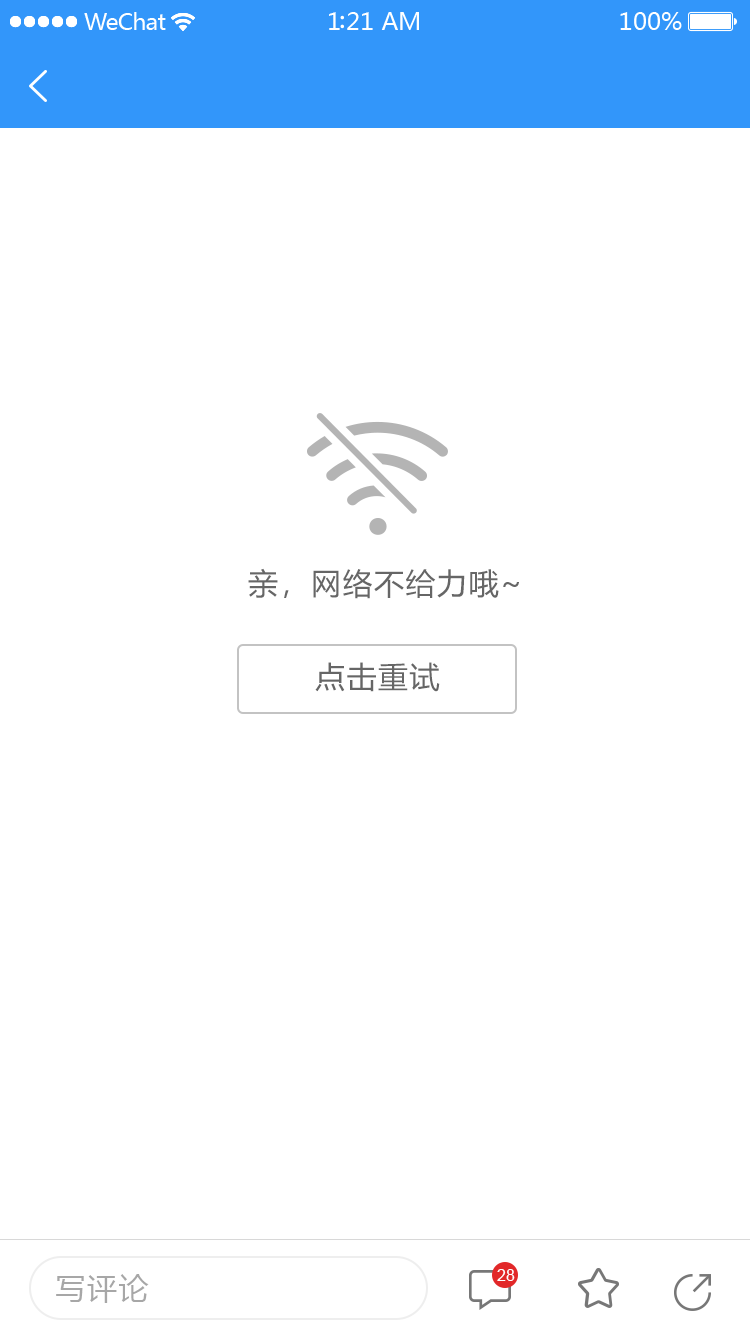
<style>
.page{position:relative;width:750px;height:1334px;background:#ffffff}
.page>*{position:absolute;margin:0}
.t1{font:30px "MicrosoftYaHei";letter-spacing:0.05em;color:#666666}
.t2{font:30px "MicrosoftYaHei";letter-spacing:0.05em;color:#a7a7a7}
.t3{font:16px "ArialMT";color:#ffffff}
</style>
<div class="page">
<p class="t1" style="left:248px;top:568px;width:271px;height:31px">亲，网络不给力哦~</p>
<p class="t1" style="left:315px;top:662px;width:125px;height:30px">点击重试</p>
<p class="t2" style="left:56px;top:1274px;width:93px;height:29px">写评论</p>
<p class="t3" style="left:497px;top:1269px;width:18px;height:12px">28</p>
</div>
